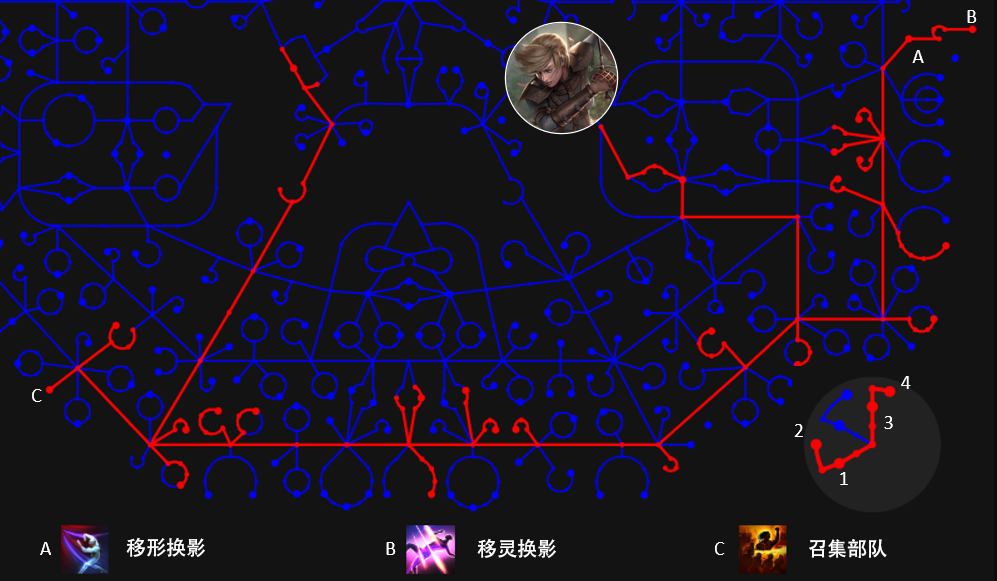
<style>
.page{position:relative;width:997px;height:581px;background:#131313}
.page>*{position:absolute;margin:0}
.t1{font:20px "AdobeHeitiStd-Regular";color:#ffffff}
</style>
<div class="page">
<p class="t1" style="left:126px;top:537px;width:79px;height:20px">移形换影</p>
<p class="t1" style="left:477px;top:538px;width:79px;height:20px">移灵换影</p>
<p class="t1" style="left:809px;top:539px;width:78px;height:19px">召集部队</p>
</div>
